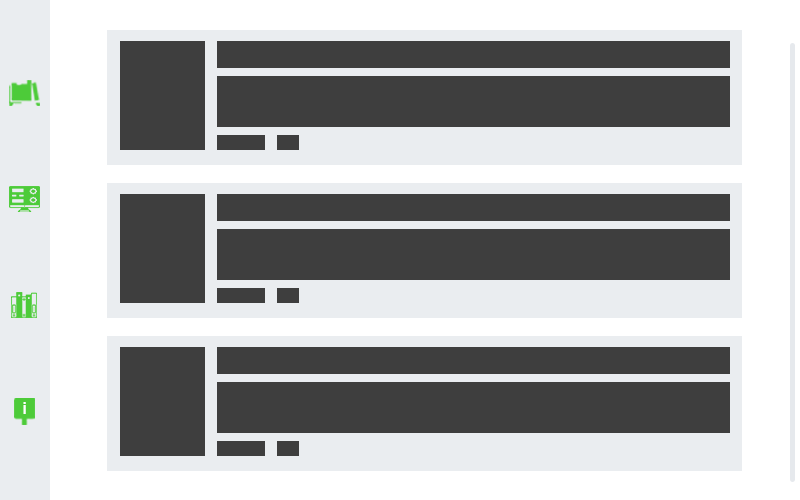
<style>
.page{position:relative;width:800px;height:500px;background:#3e3e3e}
.page>*{position:absolute;margin:0}
.t1{font:17.5px "Arial-BoldMT";color:#ffffff}
</style>
<div class="page">
<p class="t1" style="left:23px;top:402px;width:3px;height:12px">i</p>
</div>
